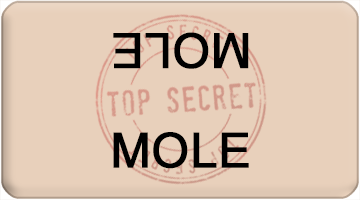
<style>
.page{position:relative;width:360px;height:200px;background:#e8d0bb}
.page>*{position:absolute;margin:0}
.t1{font:48px "ArialMT";color:#000000;font-weight:bold}
</style>
<div class="page">
<p class="t1" style="left:113px;top:32px;width:136px;height:37px;rotate:180deg">MOLE</p>
<p class="t1" style="left:113px;top:132px;width:136px;height:37px">MOLE</p>
</div>
